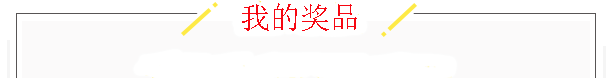
<style>
.page{position:relative;width:612px;height:78px;background:#ffffff}
.page>*{position:absolute;margin:0}
.t1{font:30px "SimSun";color:#f60611}
</style>
<div class="page">
<p class="t1" style="left:242px;top:3px;width:115px;height:28px">我的奖品</p>
</div>
